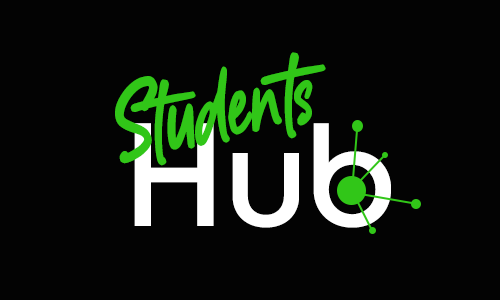
<style>
.page{position:relative;width:500px;height:300px;background:#030303}
.page>*{position:absolute;margin:0}
.t1{font:110.1px "TimelessNotesRegular";color:#31c618}
.t2{font:148.3px "PublicaPlay-Regular";color:#ffffff}
</style>
<div class="page">
<p class="t1" style="left:115px;top:52px;width:211px;height:114px;rotate:-12deg">Students</p>
<p class="t2" style="left:134px;top:123px;width:257px;height:105px">Hub</p>
</div>
